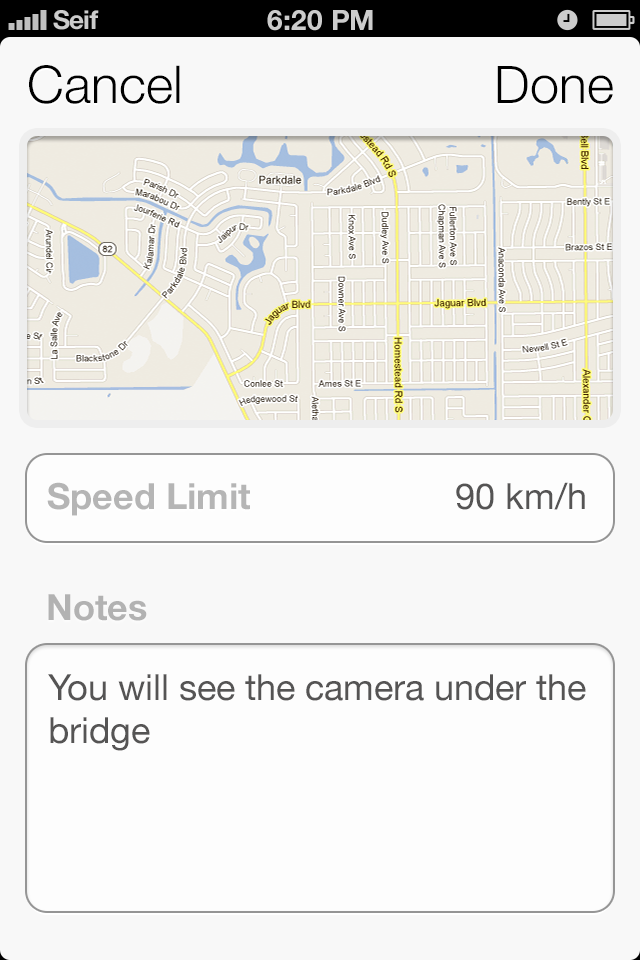
<style>
.page{position:relative;width:640px;height:960px;background:#f8f8f8}
.page>*{position:absolute;margin:0}
.t1{font:52px "HelveticaNeue-Light";color:#000000}
.t2{font:36px "HelveticaNeue-Bold";color:#b5b5b5}
.t3{font:36px "HelveticaNeue";color:#555454}
.t4{font:36px "HelveticaNeue-Bold";color:#b2b2b2}
</style>
<div class="page">
<p class="t1" style="left:29px;top:65px;width:151px;height:39px">Cancel</p>
<p class="t1" style="left:497px;top:66px;width:116px;height:38px">Done</p>
<p class="t2" style="left:47px;top:482px;width:203px;height:34px">Speed Limit</p>
<p class="t3" style="left:456px;top:482px;width:129px;height:28px">90 km/h</p>
<p class="t4" style="left:48px;top:594px;width:99px;height:27px">Notes</p>
<p class="t3" style="left:48px;top:674px;width:538px;height:77px">You will see the camera under the bridge</p>
</div>
